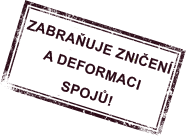
<style>
.page{position:relative;width:186px;height:136px;background:#ffffff}
.page>*{position:absolute;margin:0}
.t1{font:14px/24px "Arial-BoldMT";letter-spacing:0.02em;color:#2c0c18;text-transform:uppercase}
</style>
<div class="page">
<p class="t1" style="left:26px;top:19px;width:148px;height:87px;text-align:center;rotate:18deg">Zabraňuje zničení <br>a deformaci <br>spojů!</p>
</div>
